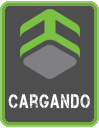
<style>
.page{position:relative;width:99px;height:128px;background:#4e4e4e}
.page>*{position:absolute;margin:0}
.t1{font:19.6px "Captureit";letter-spacing:0.1em;color:#fefefe;scale:0.71 1}
</style>
<div class="page">
<p class="t1" style="left:8px;top:94px;width:82px;height:15px">cargando</p>
</div>
